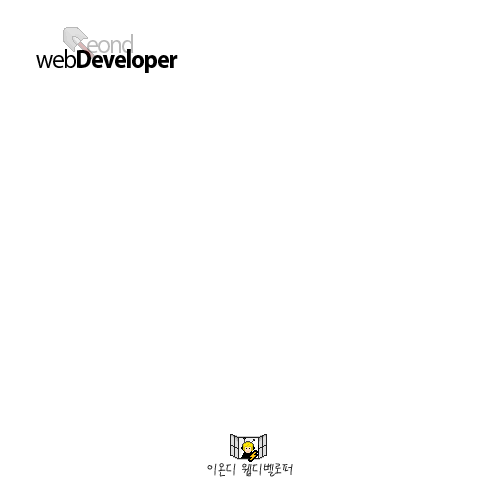
<style>
.page{position:relative;width:500px;height:500px;background:#ffffff}
.page>*{position:absolute;margin:0}
.t1{font:26.4px/15px "Myriad-Bold";letter-spacing:-0.05em;color:#000000;scale:0.91 1}
.t2{font:26.4px/15px "Myriad-Roman";letter-spacing:-0.05em;color:#a6a6a6;scale:0.91 1}
.t3{font:26.4px/15px "Myriad-Roman";letter-spacing:-0.05em;color:#bababa;scale:0.91 1}
.t4{font:26.4px/15px "Myriad-Roman";letter-spacing:-0.05em;color:#000000;scale:0.91 1}
.t5{font:15.4px "PyunjiR-HM";letter-spacing:-0.1em;color:#2b2b2b;scale:0.91 1}
</style>
<div class="page">
<p class="t1" style="left:36px;top:34px;width:142px;height:39px"><span class="t2">             </span><span class="t3">eond<br></span><span class="t4">web</span>Developer</p>
<p class="t5" style="left:207px;top:463px;width:86px;height:14px">이온디 웹디벨로퍼</p>
</div>
